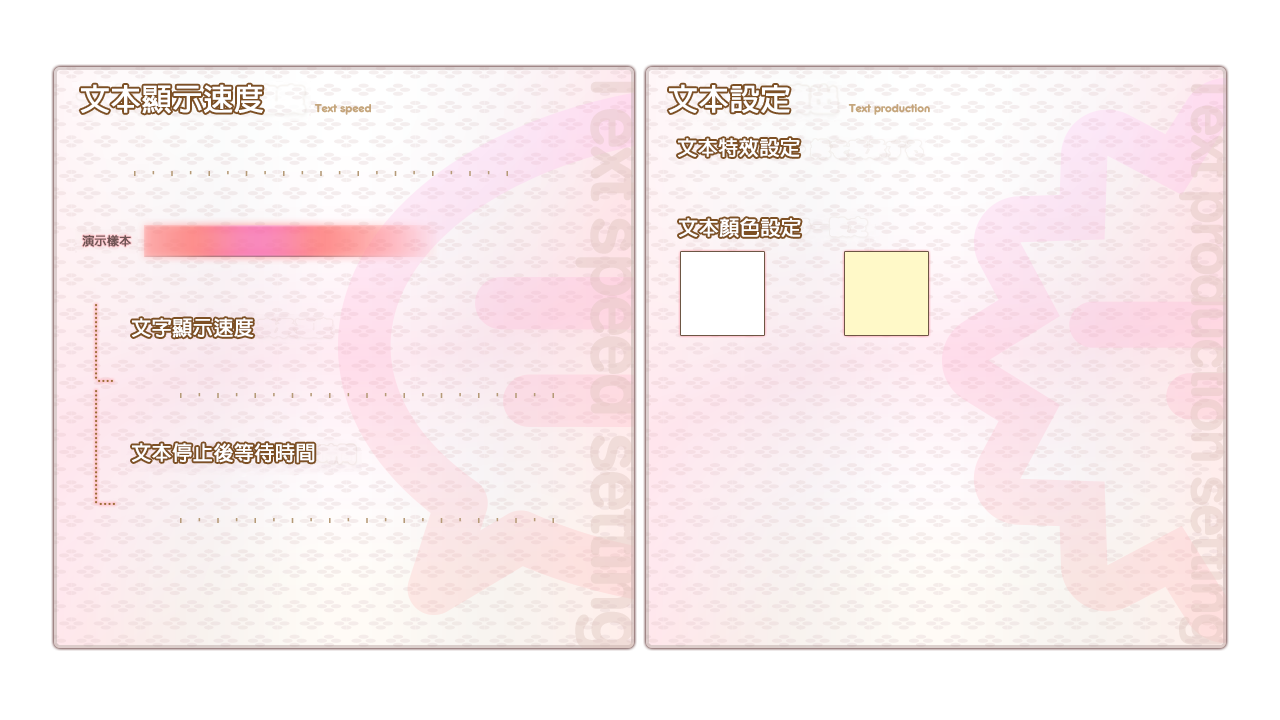
<style>
.page{position:relative;width:1280px;height:720px;background:#ffffff}
.page>*{position:absolute;margin:0}
.t1{font:30px "AdobeFanHeitiStd-Bold";color:#ffffff;font-weight:bold}
.t2{font:20px "AdobeFanHeitiStd-Bold";color:#ffffff;font-weight:bold}
.t3{font:12px "AdobeFanHeitiStd-Bold";color:#705555;font-weight:bold}
</style>
<div class="page">
<p class="t1" style="left:80px;top:84px;width:183px;height:30px">文本顯示速度</p>
<p class="t1" style="left:668px;top:84px;width:122px;height:29px">文本設定</p>
<p class="t2" style="left:678px;top:138px;width:122px;height:19px">文本特效設定</p>
<p class="t2" style="left:679px;top:218px;width:122px;height:20px">文本顏色設定</p>
<p class="t3" style="left:82px;top:235px;width:49px;height:12px">演示樣本</p>
<p class="t2" style="left:132px;top:318px;width:122px;height:20px">文字顯示速度</p>
<p class="t2" style="left:132px;top:443px;width:183px;height:20px">文本停止後等待時間</p>
</div>
